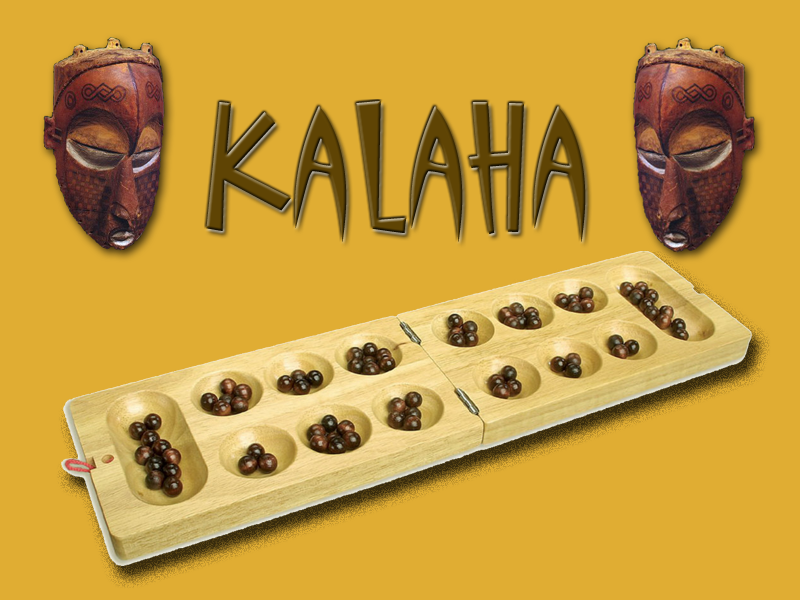
<style>
.page{position:relative;width:800px;height:600px;background:#e0ad33}
.page>*{position:absolute;margin:0}
.t1{font:149.4px "MatisseITC-Regular";color:#5f4404}
</style>
<div class="page">
<p class="t1" style="left:206px;top:101px;width:380px;height:141px">kalaha</p>
</div>
